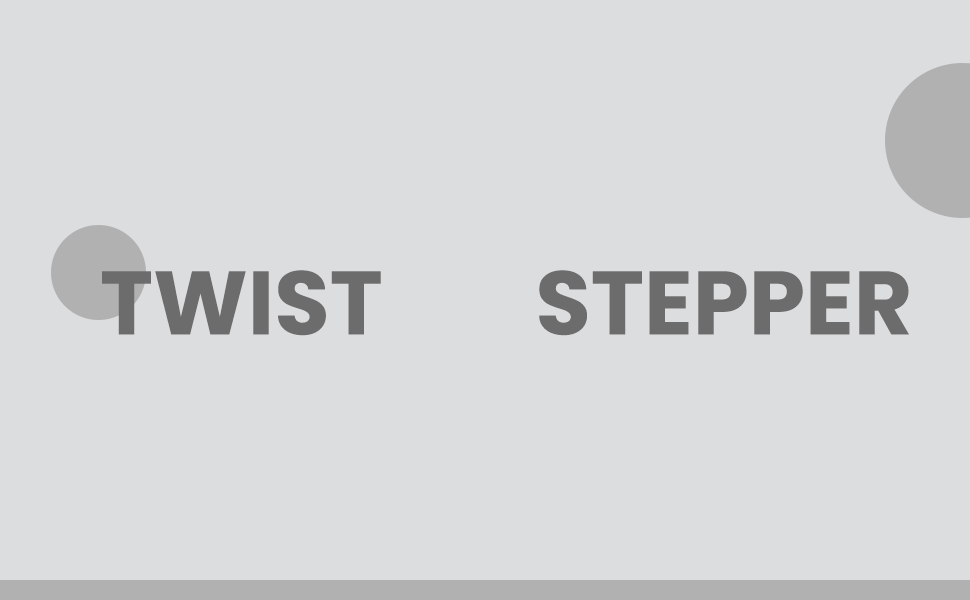
<style>
.page{position:relative;width:970px;height:600px;background:#dcdddf}
.page>*{position:absolute;margin:0}
.t1{font:90px "Poppins-Bold";color:#6c6c6c;text-transform:uppercase}
</style>
<div class="page">
<p class="t1" style="left:102px;top:270px;width:807px;height:66px">TWIST        STEPPER</p>
</div>
